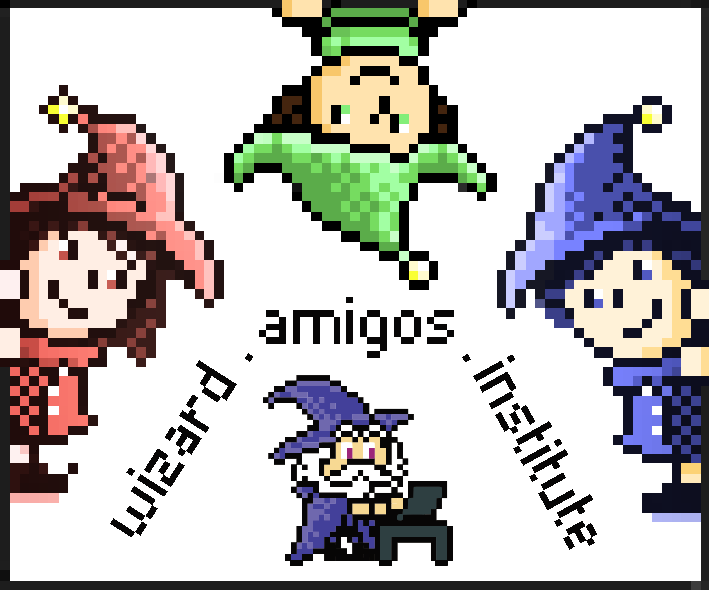
<style>
.page{position:relative;width:709px;height:590px;background:#ffffff}
.page>*{position:absolute;margin:0}
.t1{font:87.5px "Pixelade";color:#070606}
.t2{font:83.3px "Pixelade";color:#070606}
.t3{font:83.3px "Pixelade";letter-spacing:-0.06em;color:#070606}
</style>
<div class="page">
<p class="t1" style="left:259px;top:297px;width:195px;height:61px">amigos</p>
<p class="t2" style="left:110px;top:353px;width:143px;height:184px;rotate:-57deg">wizard .</p>
<p class="t2" style="left:462px;top:354px;width:135px;height:196px;rotate:61deg"><span class="t3">. </span>institute</p>
</div>
